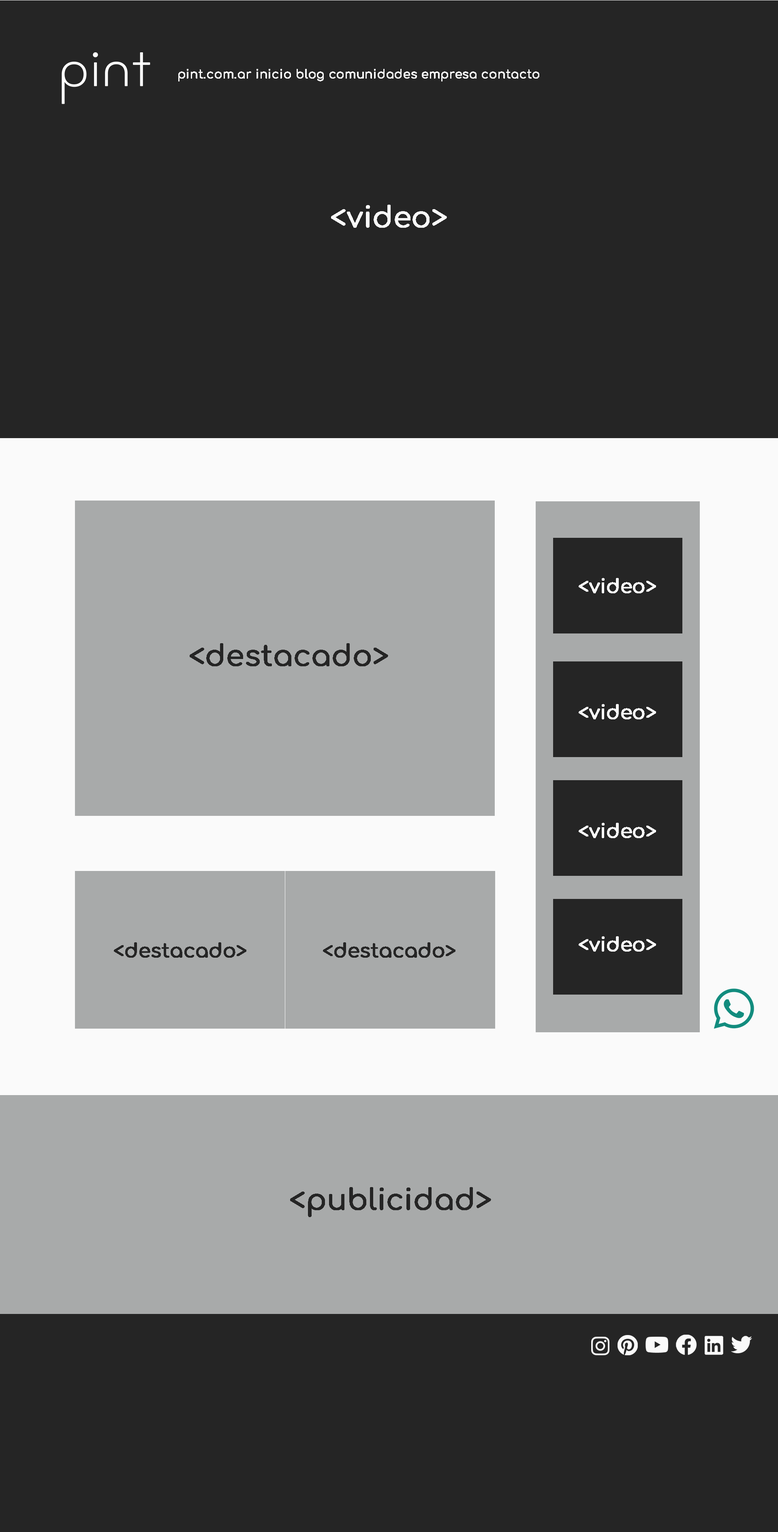
<style>
.page{position:relative;width:778px;height:1532px;background:#252525}
.page>*{position:absolute;margin:0}
.t1{font:12.2px "Comfortaa-Medium";letter-spacing:-0.01em;color:#fafafa;font-weight:bold}
.t2{font:29.2px "Comfortaa-Medium";letter-spacing:-0.01em;color:#fafafa;font-weight:bold}
.t3{font:19.5px "Comfortaa-Medium";letter-spacing:-0.01em;color:#fafafa;font-weight:bold}
.t4{font:29.2px "Comfortaa-Medium";letter-spacing:-0.01em;color:#252525;font-weight:bold}
.t5{font:19.5px "Comfortaa-Medium";letter-spacing:-0.01em;color:#252525;font-weight:bold}
</style>
<div class="page">
<p class="t1" style="left:178px;top:69px;width:362px;height:12px">pint.com.ar inicio blog comunidades empresa contacto</p>
<p class="t2" style="left:331px;top:205px;width:116px;height:23px">&lt;video&gt;</p>
<p class="t3" style="left:579px;top:578px;width:77px;height:15px">&lt;video&gt;</p>
<p class="t4" style="left:190px;top:643px;width:198px;height:23px">&lt;destacado&gt;</p>
<p class="t3" style="left:579px;top:704px;width:77px;height:15px">&lt;video&gt;</p>
<p class="t3" style="left:579px;top:823px;width:77px;height:15px">&lt;video&gt;</p>
<p class="t3" style="left:579px;top:936px;width:77px;height:16px">&lt;video&gt;</p>
<p class="t5" style="left:114px;top:942px;width:132px;height:16px">&lt;destacado&gt;</p>
<p class="t5" style="left:323px;top:942px;width:133px;height:16px">&lt;destacado&gt;</p>
<p class="t4" style="left:290px;top:1187px;width:201px;height:30px">&lt;publicidad&gt;</p>
</div>
